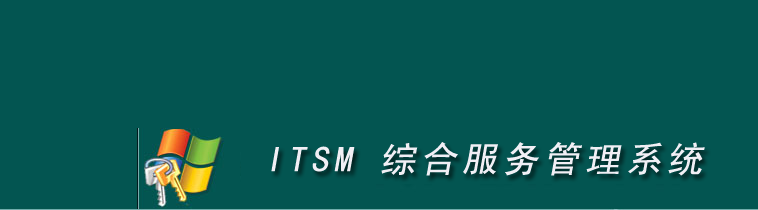
<style>
.page{position:relative;width:758px;height:210px;background:#035551}
.page>*{position:absolute;margin:0}
.t1{font:36px "SimHei";letter-spacing:0.14em;color:#f1eff5;font-style:italic}
</style>
<div class="page">
<p class="t1" style="left:271px;top:142px;width:434px;height:34px">ITSM 综合服务管理系统</p>
</div>
